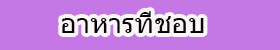
<style>
.page{position:relative;width:280px;height:50px;background:#c577e5}
.page>*{position:absolute;margin:0}
.t1{font:27.8px "Tahoma";color:#09020c}
</style>
<div class="page">
<p class="t1" style="left:62px;top:11px;width:142px;height:22px">อาหารที่ชอบ</p>
</div>
